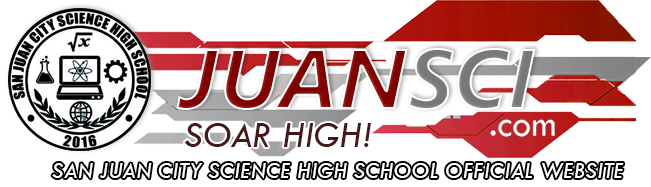
<style>
.page{position:relative;width:651px;height:187px;background:#ffffff}
.page>*{position:absolute;margin:0}
.t1{font:85.8px "SegoeUI-BoldItalic";color:#800000}
.t2{font:85.8px "SegoeUI-BoldItalic";color:#787878}
.t3{font:37.5px "TwCenMT-Italic";color:#461919}
.t4{font:23.9px "TwCenMT-Italic";color:#ffffff}
</style>
<div class="page">
<p class="t1" style="left:176px;top:48px;width:360px;height:62px">JUAN<span class="t2">SCI</span></p>
<p class="t3" style="left:184px;top:123px;width:187px;height:24px">SOAR HIGH!</p>
<p class="t4" style="left:52px;top:162px;width:572px;height:17px">SAN JUAN CITY SCIENCE HIGH SCHOOL OFFICIAL WEBSITE</p>
</div>
